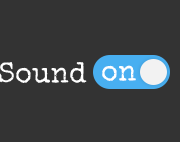
<style>
.page{position:relative;width:180px;height:142px;background:#333333}
.page>*{position:absolute;margin:0}
.t1{font:29px "SpecialElite-Regular";color:#ffffff}
</style>
<div class="page">
<p class="t1" style="left:0px;top:62px;width:87px;height:21px">Sound</p>
<p class="t1" style="left:102px;top:65px;width:34px;height:16px">on</p>
</div>
